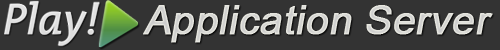
<style>
.page{position:relative;width:500px;height:50px;background:#333333}
.page>*{position:absolute;margin:0}
.t1{font:40px "ArialMT";color:#cccccc;font-weight:bold;font-style:italic}
</style>
<div class="page">
<p class="t1" style="left:143px;top:5px;width:350px;height:38px">Application Server</p>
</div>
